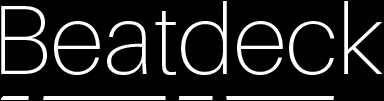
<style>
.page{position:relative;width:384px;height:101px;background:#000000}
.page>*{position:absolute;margin:0}
.t1{font:99px "Aileron-Thin";color:#ffffff}
</style>
<div class="page">
<p class="t1" style="left:1px;top:1px;width:382px;height:74px">Beatdeck</p>
</div>
